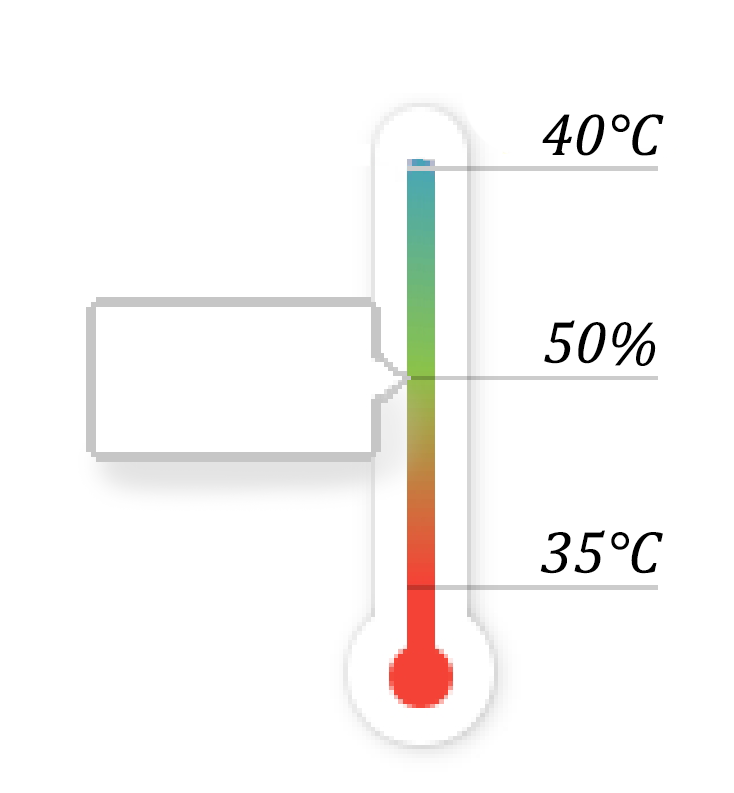
<style>
.page{position:relative;width:734px;height:793px;background:#ffffff}
.page>*{position:absolute;margin:0}
.t1{font:60px "Cambria-Italic";letter-spacing:0.01em;color:#000000}
</style>
<div class="page">
<p class="t1" style="left:542px;top:114px;width:122px;height:42px">40°C</p>
<p class="t1" style="left:544px;top:320px;width:112px;height:46px">50%</p>
<p class="t1" style="left:540px;top:530px;width:123px;height:44px">35°C</p>
</div>
